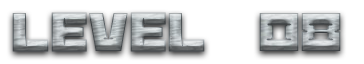
<style>
.page{position:relative;width:364px;height:64px;background:#ffffff}
.page>*{position:absolute;margin:0}
.t1{font:60px "BananaBrick"}
</style>
<div class="page">
<p class="t1" style="left:12px;top:12px;width:329px;height:40px">Level  08</p>
</div>
